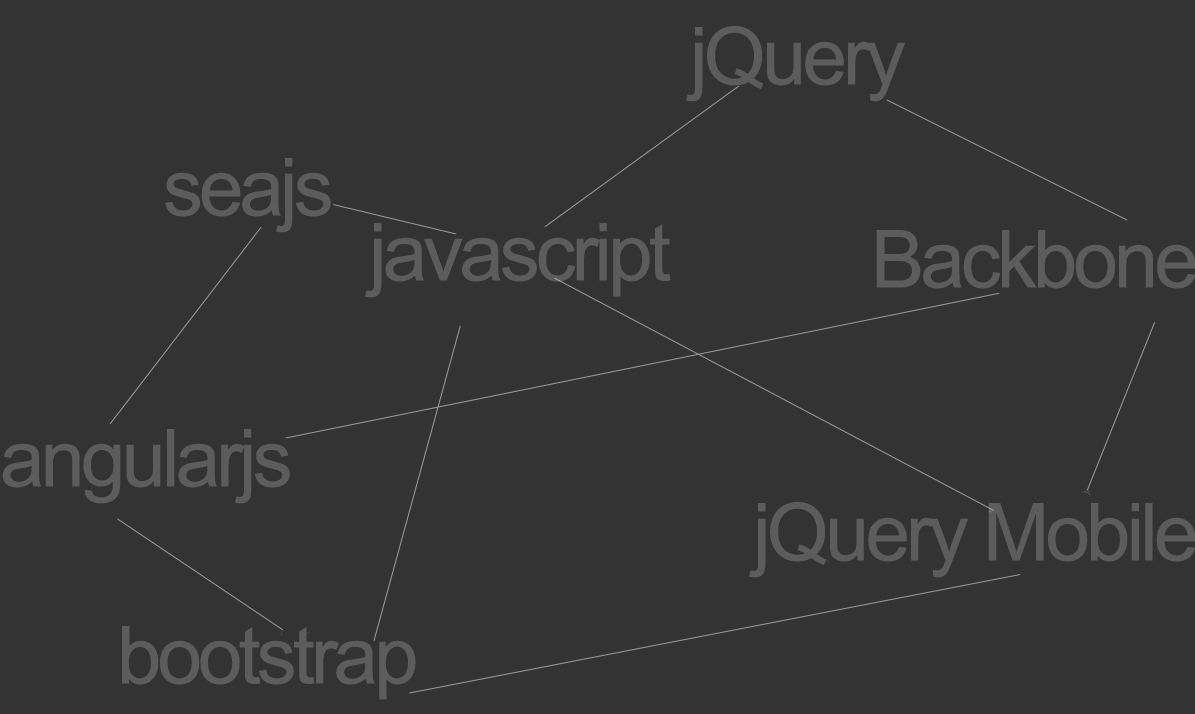
<style>
.page{position:relative;width:1195px;height:714px;background:#333333}
.page>*{position:absolute;margin:0}
.t1{font:80px "ArialMT";letter-spacing:-0.05em;color:#5c5c5c}
</style>
<div class="page">
<p class="t1" style="left:686px;top:26px;width:219px;height:76px">jQuery</p>
<p class="t1" style="left:165px;top:158px;width:166px;height:75px">seajs</p>
<p class="t1" style="left:365px;top:223px;width:306px;height:75px">javascript</p>
<p class="t1" style="left:876px;top:230px;width:320px;height:59px">Backbone</p>
<p class="t1" style="left:2px;top:429px;width:288px;height:75px">angularjs</p>
<p class="t1" style="left:749px;top:502px;width:447px;height:76px">jQuery Mobile</p>
<p class="t1" style="left:122px;top:626px;width:294px;height:74px">bootstrap</p>
</div>
